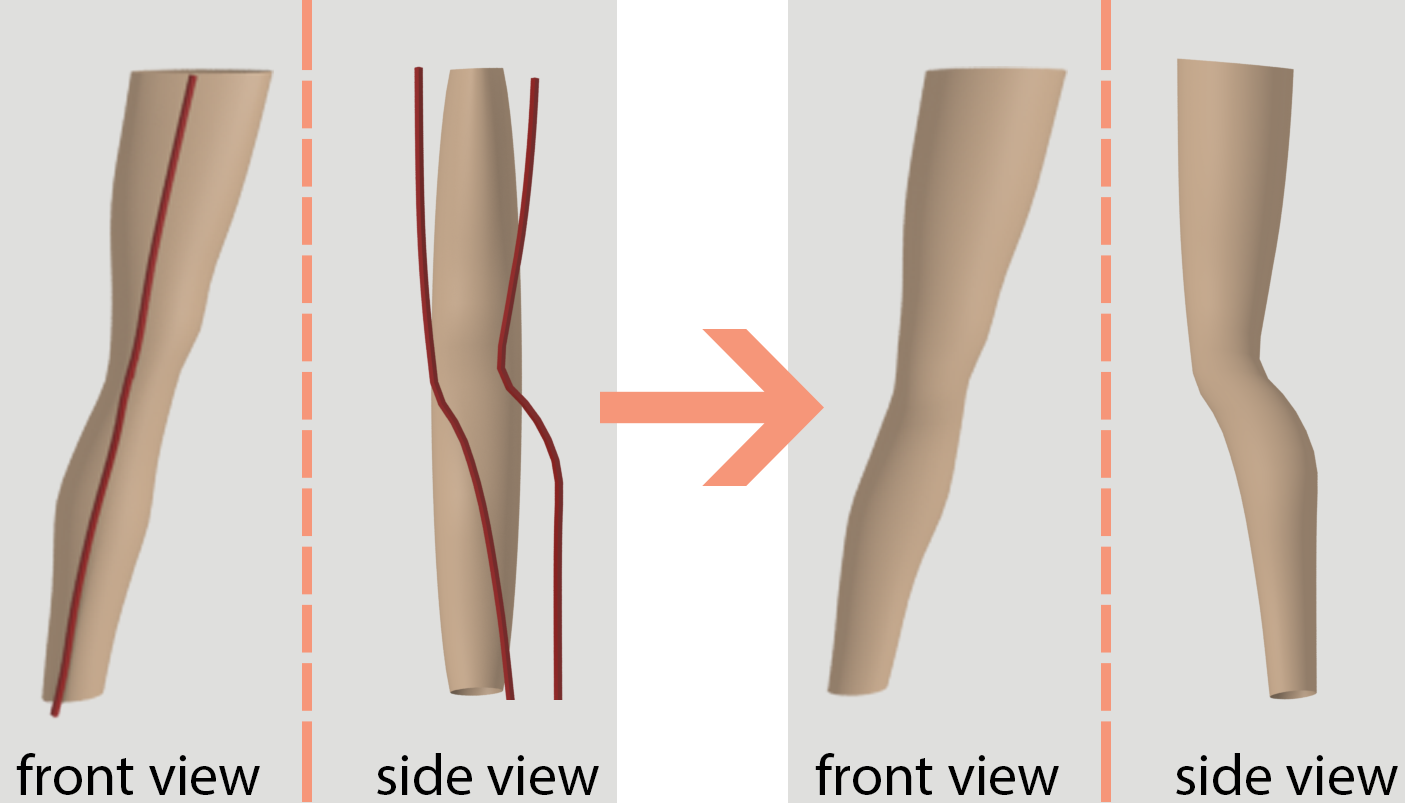
<style>
.page{position:relative;width:1405px;height:803px;background:#dfdfdd}
.page>*{position:absolute;margin:0}
.t1{font:58.3px "MyriadPro-Regular";color:#000000}
</style>
<div class="page">
<p class="t1" style="left:16px;top:753px;width:244px;height:42px">front view</p>
<p class="t1" style="left:377px;top:753px;width:222px;height:42px">side view</p>
<p class="t1" style="left:815px;top:753px;width:244px;height:42px">front view</p>
<p class="t1" style="left:1176px;top:753px;width:222px;height:42px">side view</p>
</div>
